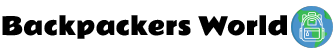
<style>
.page{position:relative;width:335px;height:56px;background:#ffffff}
.page>*{position:absolute;margin:0}
.t1{font:24px "RammettoOne-Regular";color:#000000}
</style>
<div class="page">
<p class="t1" style="left:2px;top:15px;width:285px;height:24px">Backpackers World</p>
</div>
